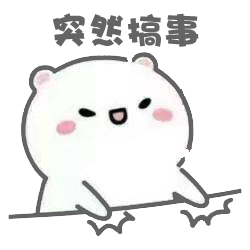
<style>
.page{position:relative;width:250px;height:250px;background:#ffffff}
.page>*{position:absolute;margin:0}
.t1{font:36px "DFHaiBaoW12";letter-spacing:0.05em;color:#656464}
</style>
<div class="page">
<p class="t1" style="left:53px;top:13px;width:146px;height:34px">突然搞事</p>
</div>
